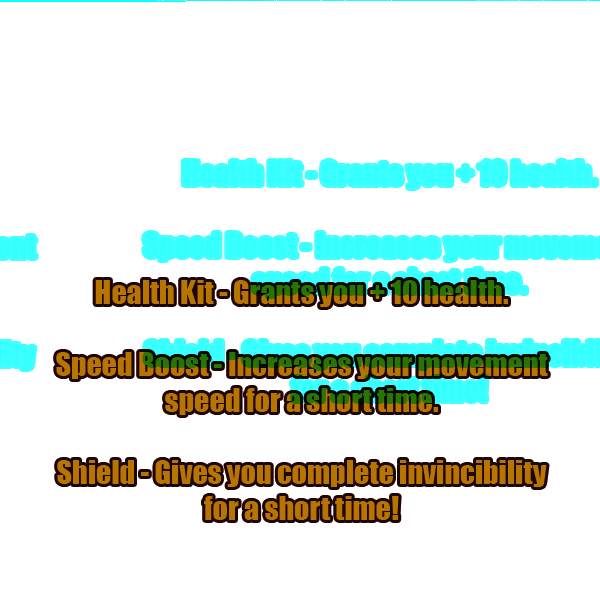
<style>
.page{position:relative;width:600px;height:600px;background:#ffffff}
.page>*{position:absolute;margin:0}
.t1{font:30px "Impact"}
</style>
<div class="page">
<p class="t1" style="left:56px;top:160px;width:492px;height:240px;text-align:center">Health Kit - Grants you + 10 health.<br><br>Speed Boost - Increases your movement speed for a short time.<br><br>Shield - Gives you complete invincibility for a short time!</p>
</div>
